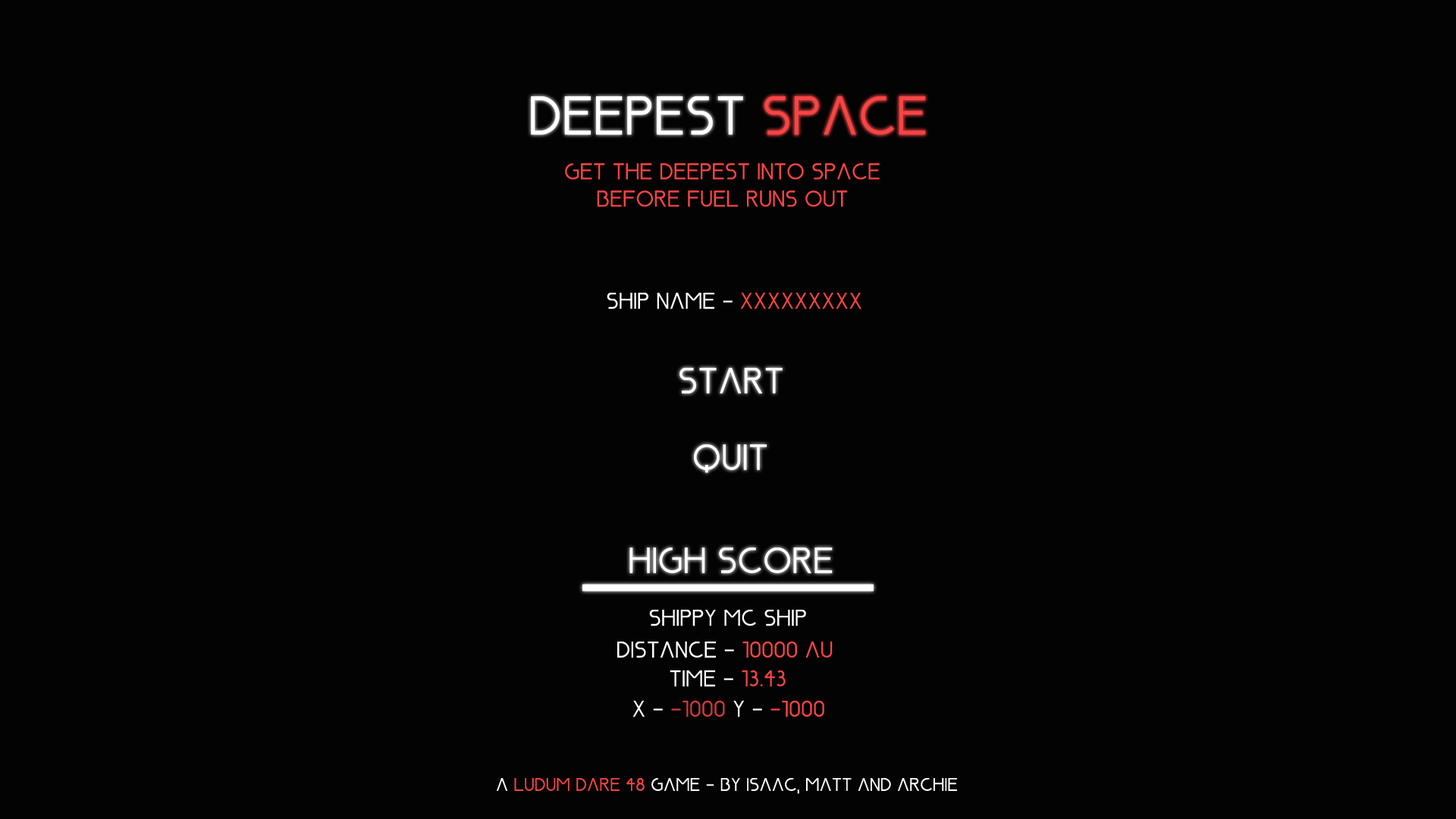
<style>
.page{position:relative;width:1456px;height:819px;background:#030303}
.page>*{position:absolute;margin:0}
.t1{font:54.6px "Nasa21";color:#ffffff}
.t2{font:54.6px "Nasa21";color:#f84444}
.t3{font:22.7px "Nasa21";color:#f84444}
.t4{font:22.7px "Nasa21";color:#ffffff}
.t5{font:36.4px "Nasa21";color:#ffffff}
.t6{font:22.7px "Nasa21";color:#cf3939}
.t7{font:22.7px "Nasa21";color:#f74444}
.t8{font:18.2px "Nasa21";color:#ffffff}
.t9{font:18.2px "Nasa21";color:#f84444}
</style>
<div class="page">
<p class="t1" style="left:531px;top:96px;width:212px;height:39px">DEEPEST</p>
<p class="t2" style="left:764px;top:96px;width:161px;height:39px">SPACE</p>
<p class="t3" style="left:565px;top:163px;width:315px;height:44px;text-align:center">GET THE DEEPEST INTO SPACE<br>BEFORE FUEL RUNS OUT</p>
<p class="t4" style="left:607px;top:293px;width:126px;height:16px">SHIP NAME -</p>
<p class="t3" style="left:740px;top:293px;width:121px;height:16px">XXXXXXXXX</p>
<p class="t5" style="left:679px;top:368px;width:104px;height:26px">START</p>
<p class="t5" style="left:694px;top:444px;width:73px;height:29px">QUIT</p>
<p class="t5" style="left:629px;top:548px;width:204px;height:25px">HIGH SCORE</p>
<p class="t4" style="left:649px;top:610px;width:157px;height:16px">SHIPPY MC SHIP</p>
<p class="t4" style="left:617px;top:642px;width:216px;height:16px">DISTANCE - <span class="t3">10000 AU</span></p>
<p class="t4" style="left:670px;top:670px;width:116px;height:17px">TIME - <span class="t3">13.43</span></p>
<p class="t6" style="left:632px;top:701px;width:192px;height:16px"><span class="t4">X -</span> -1000<span class="t4"> Y - </span><span class="t7">-1000</span></p>
<p class="t8" style="left:497px;top:778px;width:460px;height:16px">A <span class="t9">LUDUM DARE 48</span> GAME - BY ISAAC, MATT AND ARCHIE</p>
</div>
